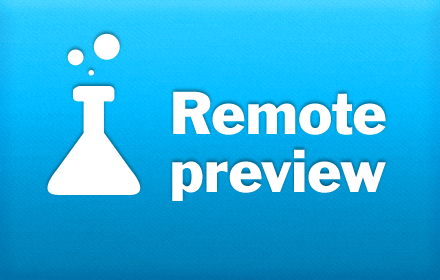
<style>
.page{position:relative;width:440px;height:280px}
.page>*{position:absolute;margin:0}
.t1{font:56px/58px "FranklinGothic-Roman";color:#ffffff}
</style>
<div class="page">
<p class="t1" style="left:172px;top:91px;width:214px;height:110px">Remote<br>preview</p>
</div>
